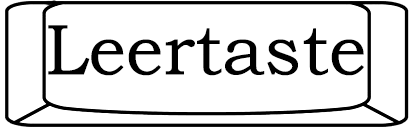
<style>
.page{position:relative;width:412px;height:130px;background:#ffffff}
.page>*{position:absolute;margin:0}
.t1{font:72px "BookmanOldStyle";color:#000000}
</style>
<div class="page">
<p class="t1" style="left:48px;top:25px;width:316px;height:51px">Leertaste</p>
</div>
